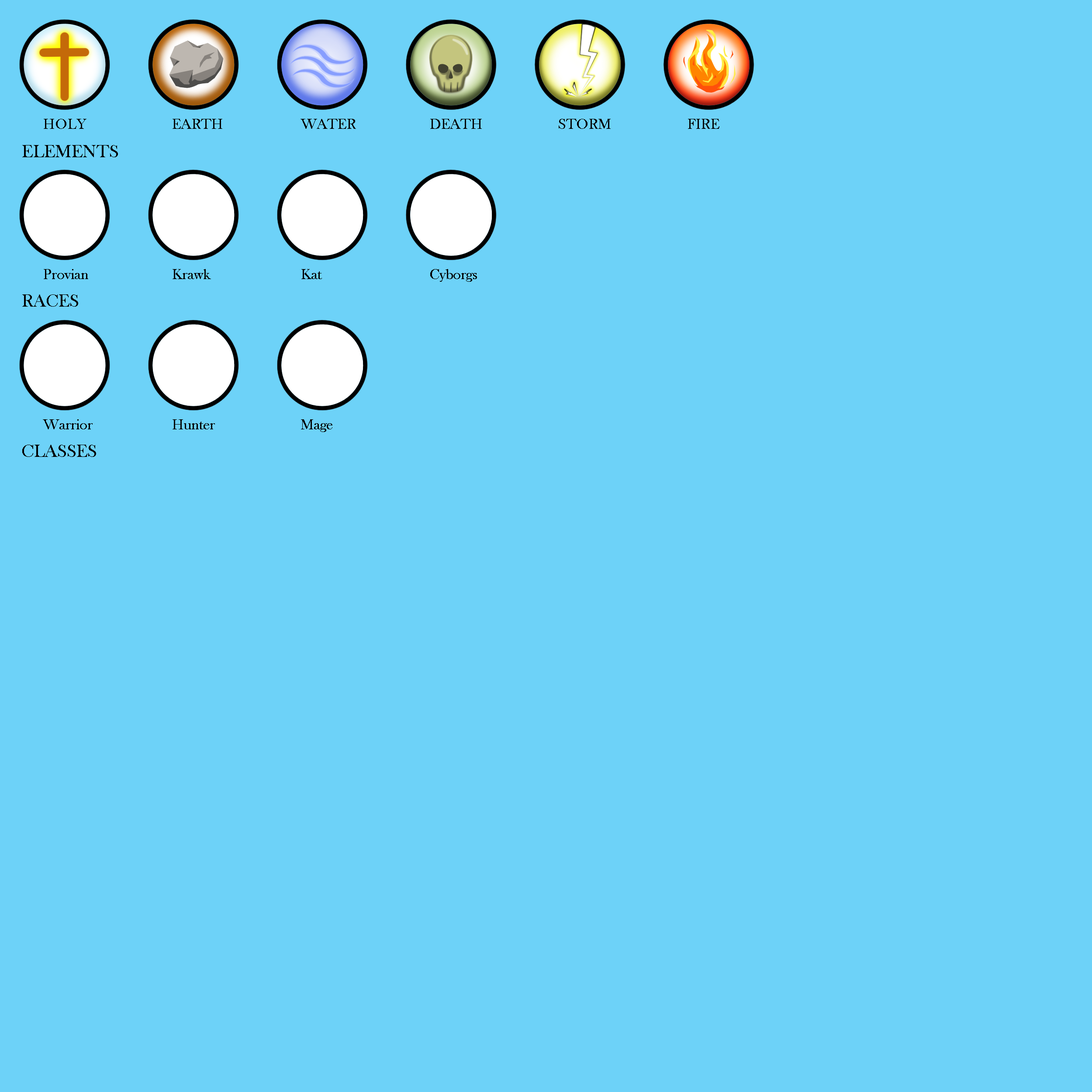
<style>
.page{position:relative;width:1092px;height:1092px;background:#6dd2f8}
.page>*{position:absolute;margin:0}
.t1{font:14.6px "BaskOldFace";color:#000000}
.t2{font:18.2px "BaskOldFace";color:#000000}
</style>
<div class="page">
<p class="t1" style="left:44px;top:119px;width:42px;height:10px">HOLY</p>
<p class="t1" style="left:173px;top:119px;width:49px;height:10px">EARTH</p>
<p class="t1" style="left:301px;top:119px;width:55px;height:10px">WATER</p>
<p class="t1" style="left:430px;top:119px;width:52px;height:10px">DEATH</p>
<p class="t1" style="left:559px;top:119px;width:52px;height:10px">STORM</p>
<p class="t1" style="left:688px;top:119px;width:31px;height:10px">FIRE</p>
<p class="t2" style="left:22px;top:145px;width:96px;height:12px">ELEMENTS</p>
<p class="t1" style="left:44px;top:269px;width:44px;height:10px">Provian</p>
<p class="t1" style="left:173px;top:269px;width:38px;height:10px">Krawk</p>
<p class="t1" style="left:301px;top:269px;width:21px;height:10px">Kat</p>
<p class="t1" style="left:430px;top:269px;width:47px;height:13px">Cyborgs</p>
<p class="t2" style="left:22px;top:294px;width:56px;height:13px">RACES</p>
<p class="t1" style="left:43px;top:419px;width:50px;height:10px">Warrior</p>
<p class="t1" style="left:173px;top:419px;width:42px;height:10px">Hunter</p>
<p class="t1" style="left:301px;top:419px;width:31px;height:13px">Mage</p>
<p class="t2" style="left:22px;top:445px;width:74px;height:12px">CLASSES</p>
</div>
